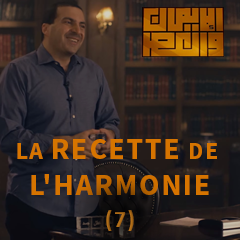
<style>
.page{position:relative;width:240px;height:240px}
.page>*{position:absolute;margin:0}
.t1{font:30px "SourceSansPro-Bold";letter-spacing:0.06em;color:#d67400;text-transform:uppercase}
.t2{font:24px "SourceSansPro-Bold";letter-spacing:0.06em;color:#d67400;text-transform:uppercase}
.t3{font:24px "Calibri-Bold";letter-spacing:0.06em;color:#aa6917}
</style>
<div class="page">
<p class="t1" style="left:17px;top:139px;width:200px;height:56px;text-align:center"><span class="t2">La </span>recette<span class="t2"> de <br></span>l'harmonie</p>
<p class="t3" style="left:106px;top:210px;width:28px;height:21px">(7)</p>
</div>
